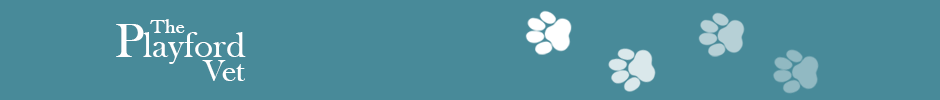
<style>
.page{position:relative;width:940px;height:100px;background:#488a99}
.page>*{position:absolute;margin:0}
.t1{font:37.2px "BaskOldFace";color:#ffffff}
.t2{font:49.6px "BaskOldFace";color:#ffffff}
.t3{font:20.5px "BaskOldFace";color:#ffffff}
.t4{font:32.4px "BaskOldFace";color:#ffffff}
</style>
<div class="page">
<p class="t1" style="left:116px;top:24px;width:130px;height:40px"><span class="t2">P</span>layford</p>
<p class="t3" style="left:150px;top:19px;width:35px;height:14px">The</p>
<p class="t4" style="left:202px;top:60px;width:43px;height:21px">Vet</p>
</div>
